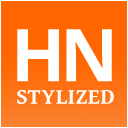
<style>
.page{position:relative;width:128px;height:128px;background:#ff6600}
.page>*{position:absolute;margin:0}
.t1{font:72.8px "OpenSans-Bold";letter-spacing:-0.075em;color:#ffffff}
.t2{font:22px "GentiumBookBasic-Bold";letter-spacing:0.02em;color:#ffffff}
</style>
<div class="page">
<p class="t1" style="left:17px;top:29px;width:95px;height:53px">HN</p>
<p class="t2" style="left:17px;top:90px;width:97px;height:14px">STYLIZED</p>
</div>
